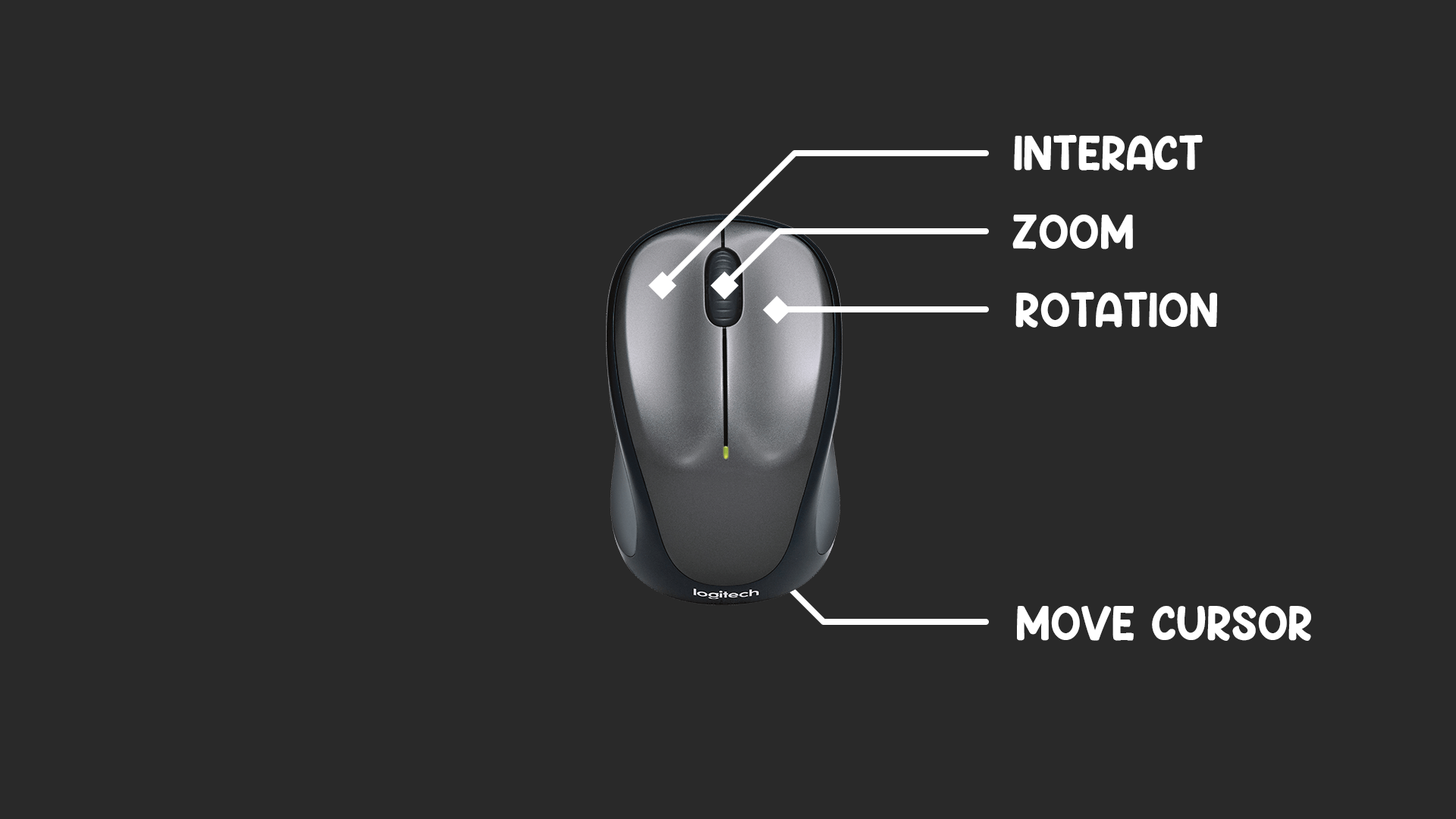
<style>
.page{position:relative;width:1456px;height:819px;background:#292929}
.page>*{position:absolute;margin:0}
.t1{font:45.5px "Hey-Comic";color:#ffffff}
</style>
<div class="page">
<p class="t1" style="left:1014px;top:135px;width:189px;height:36px">INTERACT</p>
<p class="t1" style="left:1012px;top:215px;width:121px;height:34px">ZOOM</p>
<p class="t1" style="left:1015px;top:292px;width:202px;height:36px">ROTATION</p>
<p class="t1" style="left:1017px;top:605px;width:294px;height:36px">MOVE CURSOR</p>
</div>
